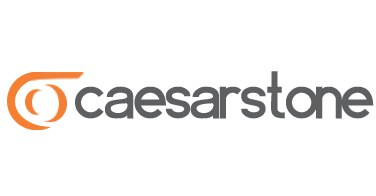
<style>
.page{position:relative;width:376px;height:196px;background:#ffffff}
.page>*{position:absolute;margin:0}
.t1{font:58px "Direct";letter-spacing:-0.02em;color:#5e5f61}
</style>
<div class="page">
<p class="t1" style="left:75px;top:71px;width:299px;height:48px">caesarstone</p>
</div>
